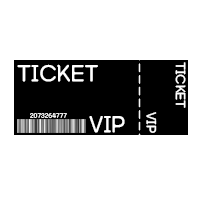
<style>
.page{position:relative;width:200px;height:200px;background:#ffffff}
.page>*{position:absolute;margin:0}
.t1{font:29.2px "YanoljaYacheR";color:#ffffff}
.t2{font:16.7px "YanoljaYacheR";color:#ffffff}
.t3{font:8.3px "YanoljaYacheR";color:#ffffff}
</style>
<div class="page">
<p class="t1" style="left:17px;top:64px;width:108px;height:69px">TICKET<br>  VIP</p>
<p class="t2" style="left:146px;top:62px;width:40px;height:71px">TICKET<br>     VIP</p>
<p class="t3" style="left:30px;top:113px;width:37px;height:6px">2073264777</p>
</div>
